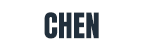
<style>
.page{position:relative;width:150px;height:50px;background:#ffffff}
.page>*{position:absolute;margin:0}
.t1{font:30px "Anton-Regular";color:#212f3c}
</style>
<div class="page">
<p class="t1" style="left:44px;top:12px;width:55px;height:27px">CHEN</p>
</div>
